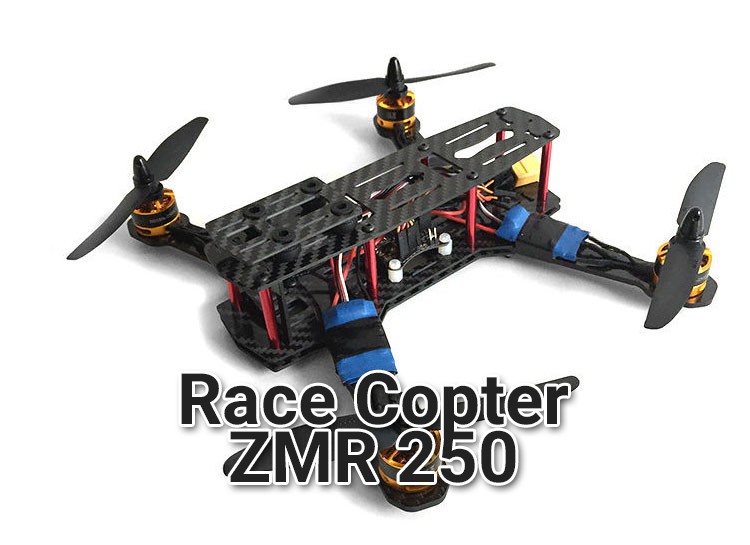
<style>
.page{position:relative;width:750px;height:545px;background:#ffffff}
.page>*{position:absolute;margin:0}
.t1{font:71.1px/58.5px "Roboto-Bold";color:#222222}
</style>
<div class="page">
<p class="t1" style="left:181px;top:372px;width:387px;height:111px;text-align:center">Race Copter<br>ZMR 250</p>
</div>
